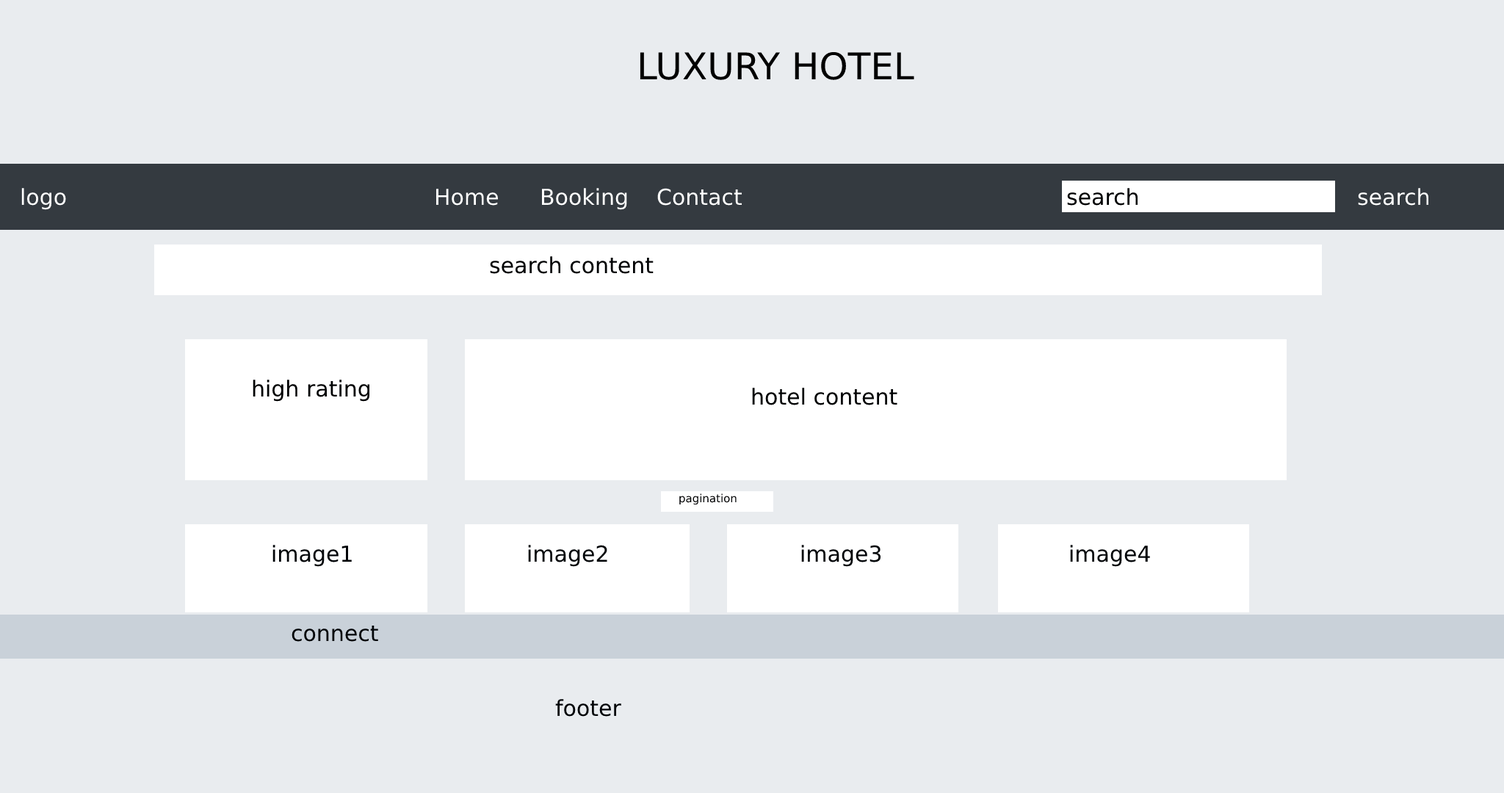
<style>
.page{position:relative;width:1504px;height:793px;background:#e9ecef}
.page>*{position:absolute;margin:0}
.t1{font:36.7px "DejaVuSans";color:#000000}
.t2{font:22px "DejaVuSans";color:#ffffff}
.t3{font:22px "DejaVuSans";color:#000203}
.t4{font:11px "DejaVuSans";color:#000203}
.t5{font:22px "DejaVuSans";color:#020508}
</style>
<div class="page">
<p class="t1" style="left:640px;top:51px;width:274px;height:29px">LUXURY HOTEL</p>
<p class="t2" style="left:21px;top:188px;width:45px;height:22px">logo</p>
<p class="t2" style="left:435px;top:189px;width:63px;height:17px">Home</p>
<p class="t2" style="left:541px;top:188px;width:86px;height:22px">Booking</p>
<p class="t2" style="left:657px;top:188px;width:85px;height:18px">Contact</p>
<p class="t3" style="left:1067px;top:188px;width:71px;height:18px">search</p>
<p class="t2" style="left:1358px;top:188px;width:71px;height:18px">search</p>
<p class="t3" style="left:490px;top:256px;width:163px;height:18px">search content</p>
<p class="t3" style="left:253px;top:380px;width:117px;height:22px">high rating</p>
<p class="t3" style="left:752px;top:388px;width:145px;height:17px">hotel content</p>
<p class="t4" style="left:679px;top:493px;width:57px;height:12px">pagination</p>
<p class="t5" style="left:272px;top:545px;width:80px;height:22px">image1</p>
<p class="t5" style="left:528px;top:545px;width:79px;height:22px">image2</p>
<p class="t5" style="left:801px;top:545px;width:80px;height:22px">image3</p>
<p class="t5" style="left:1070px;top:545px;width:80px;height:22px">image4</p>
<p class="t5" style="left:291px;top:625px;width:87px;height:17px">connect</p>
<p class="t5" style="left:555px;top:699px;width:66px;height:18px">footer</p>
</div>
